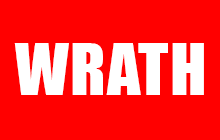
<style>
.page{position:relative;width:220px;height:140px;background:#ff0000}
.page>*{position:absolute;margin:0}
.t1{font:66.2px "Impact";letter-spacing:0.02em;color:#ffffff}
</style>
<div class="page">
<p class="t1" style="left:14px;top:43px;width:190px;height:52px">WRATH</p>
</div>
